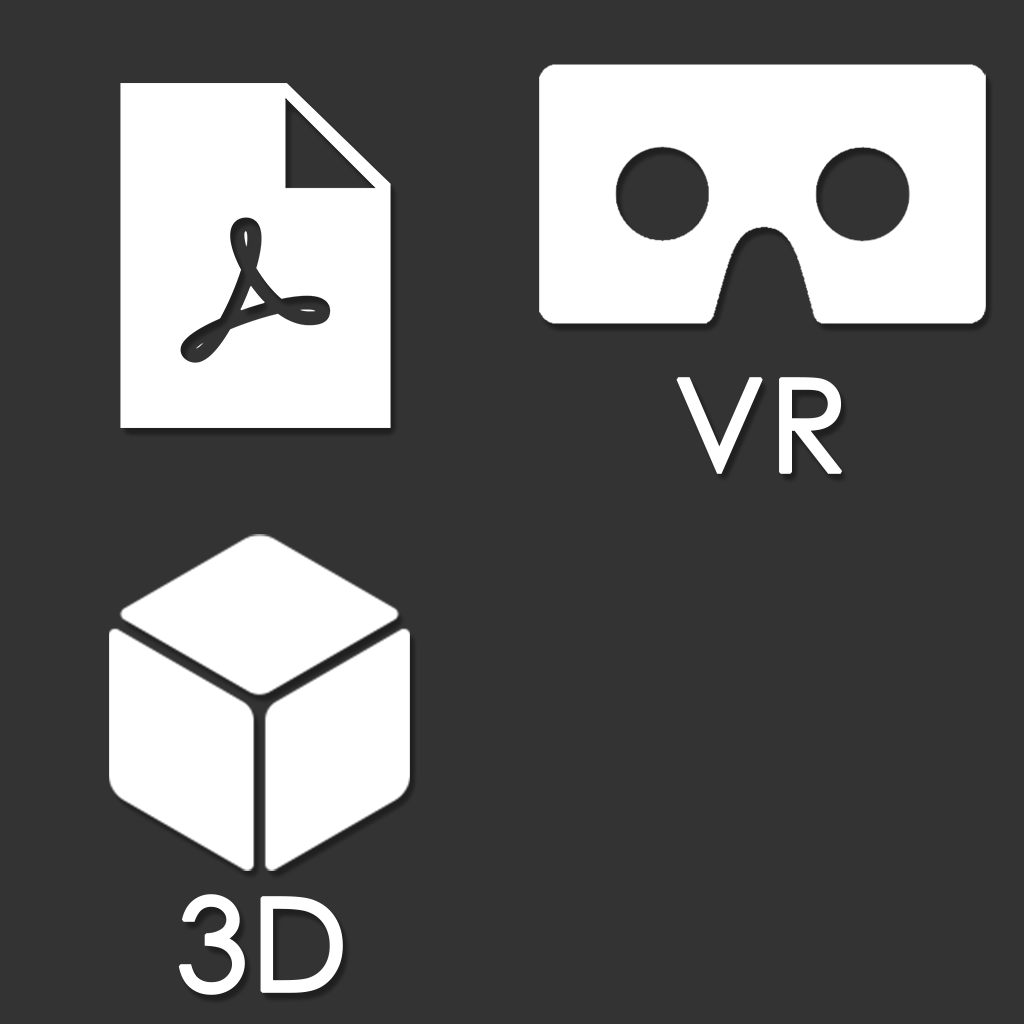
<style>
.page{position:relative;width:1024px;height:1024px;background:#333333}
.page>*{position:absolute;margin:0}
.t1{font:130px "CenturyGothic";color:#ffffff;font-weight:bold}
</style>
<div class="page">
<p class="t1" style="left:676px;top:377px;width:167px;height:97px">VR</p>
<p class="t1" style="left:178px;top:894px;width:165px;height:101px">3D</p>
</div>
